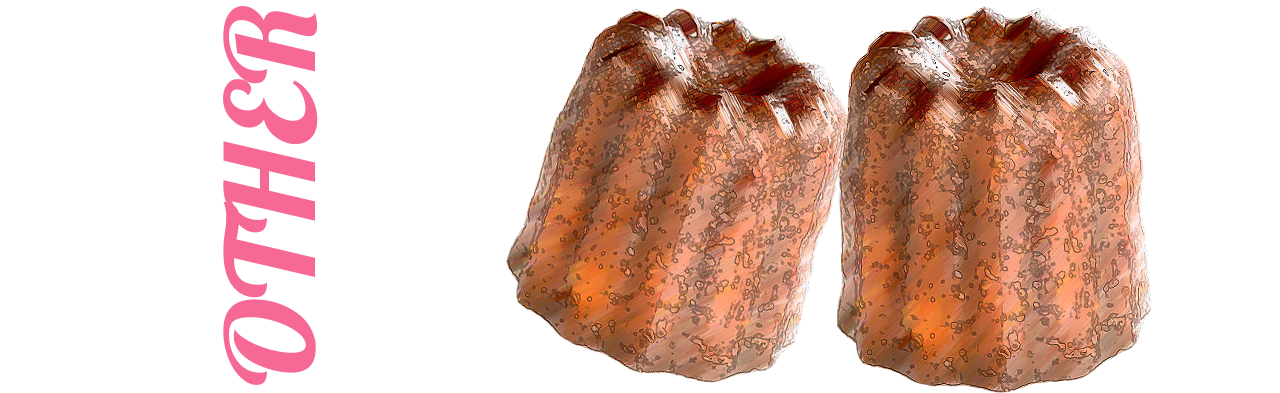
<style>
.page{position:relative;width:1280px;height:393px;background:#ffffff}
.page>*{position:absolute;margin:0}
.t1{font:122.1px "Lobster";color:#f66994;scale:1.09 1}
</style>
<div class="page">
<p class="t1" style="left:223px;top:6px;width:95px;height:379px;rotate:-90deg">OTHER</p>
</div>
